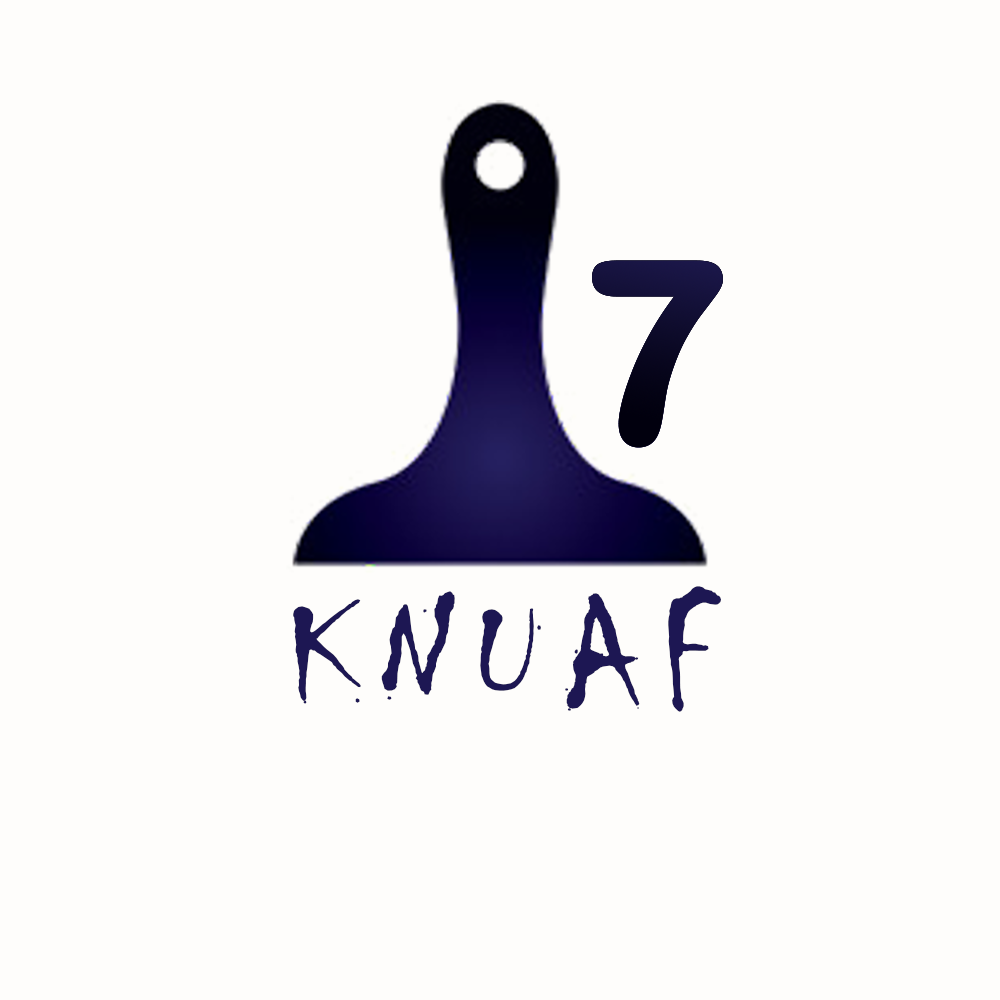
<style>
.page{position:relative;width:1000px;height:1000px;background:#fefdfb}
.page>*{position:absolute;margin:0}
.t1{font:250px "ArialRoundedMTBold";letter-spacing:0.025em;font-weight:bold}
.t2{font:157.3px "Chiller-Regular";letter-spacing:0.1em;color:#1d1753;font-weight:bold}
</style>
<div class="page">
<p class="t1" style="left:592px;top:260px;width:131px;height:188px">7</p>
<p class="t2" style="left:293px;top:586px;width:428px;height:126px">KNUAF</p>
</div>
